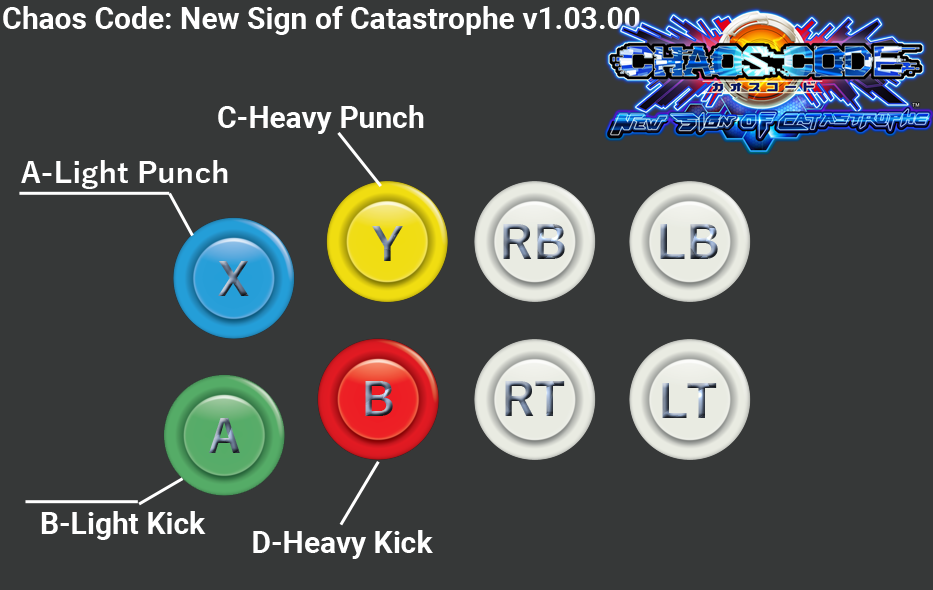
<style>
.page{position:relative;width:933px;height:590px;background:#363838}
.page>*{position:absolute;margin:0}
.t1{font:30px "Roboto-Bold";color:#ffffff}
.t2{font:30px "YuGothic-Bold";color:#ffffff}
</style>
<div class="page">
<p class="t1" style="left:3px;top:6px;width:637px;height:29px">Chaos Code: New Sign of Catastrophe v1.03.00</p>
<p class="t1" style="left:218px;top:105px;width:206px;height:29px">C-Heavy Punch</p>
<p class="t2" style="left:21px;top:160px;width:207px;height:29px">A-Light Punch</p>
<p class="t1" style="left:41px;top:511px;width:165px;height:29px">B-Light Kick</p>
<p class="t1" style="left:253px;top:530px;width:180px;height:29px">D-Heavy Kick</p>
</div>
